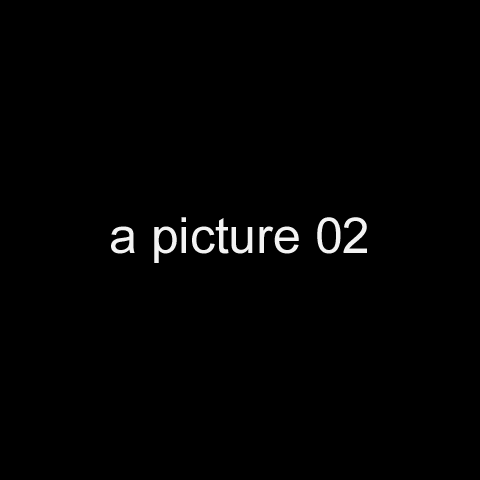
<style>
.page{position:relative;width:480px;height:480px;background:#000000}
.page>*{position:absolute;margin:0}
.t1{font:50px "ArialMT";color:#f3f3f3}
</style>
<div class="page">
<p class="t1" style="left:111px;top:217px;width:256px;height:46px">a picture 02</p>
</div>
